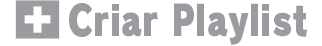
<style>
.page{position:relative;width:322px;height:46px;background:#ffffff}
.page>*{position:absolute;margin:0}
.t1{font:41.3px "RodinPro-UB";color:#9a9c9f;scale:0.82 1}
</style>
<div class="page">
<p class="t1" style="left:69px;top:3px;width:238px;height:42px">Criar Playlist</p>
</div>
